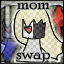
<style>
.page{position:relative;width:64px;height:64px}
.page>*{position:absolute;margin:0}
.t1{font:18px "PoorRichard-Regular";color:#000000}
</style>
<div class="page">
<p class="t1" style="left:16px;top:2px;width:34px;height:61px;text-align:center">mom<br><br><br><br><br>swap</p>
</div>
